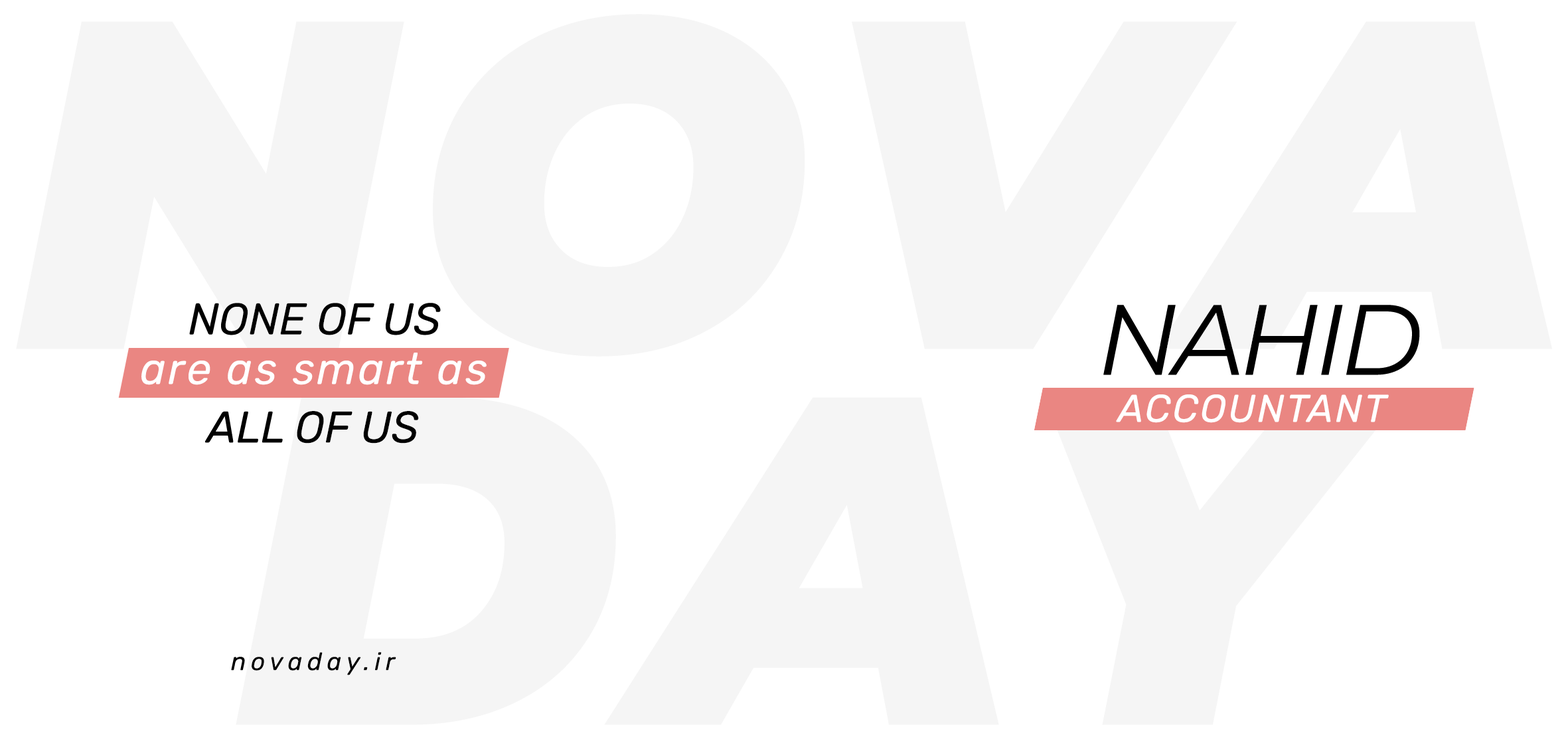
<style>
.page{position:relative;width:1568px;height:745px;background:#ffffff}
.page>*{position:absolute;margin:0}
.t1{font:44.3px "Rubik-Italic";color:#000000}
.t2{font:99.6px "Montserrat-Italic";letter-spacing:-0.05em;color:#000000}
.t3{font:44.3px "Rubik-Italic";letter-spacing:0.05em;color:#ffffff}
.t4{font:38.7px "Rubik-Italic";letter-spacing:0.05em;color:#ffffff}
.t5{font:24.9px "Rubik-Italic";letter-spacing:0.2em;color:#000000}
</style>
<div class="page">
<p class="t1" style="left:189px;top:303px;width:252px;height:32px">NONE OF US</p>
<p class="t2" style="left:1103px;top:305px;width:317px;height:70px">NAHID</p>
<p class="t3" style="left:141px;top:353px;width:346px;height:32px">are as smart as</p>
<p class="t4" style="left:1116px;top:394px;width:273px;height:29px">ACCOUNTANT</p>
<p class="t1" style="left:205px;top:411px;width:214px;height:32px">ALL OF US</p>
<p class="t5" style="left:231px;top:652px;width:165px;height:23px">novaday.ir</p>
</div>
